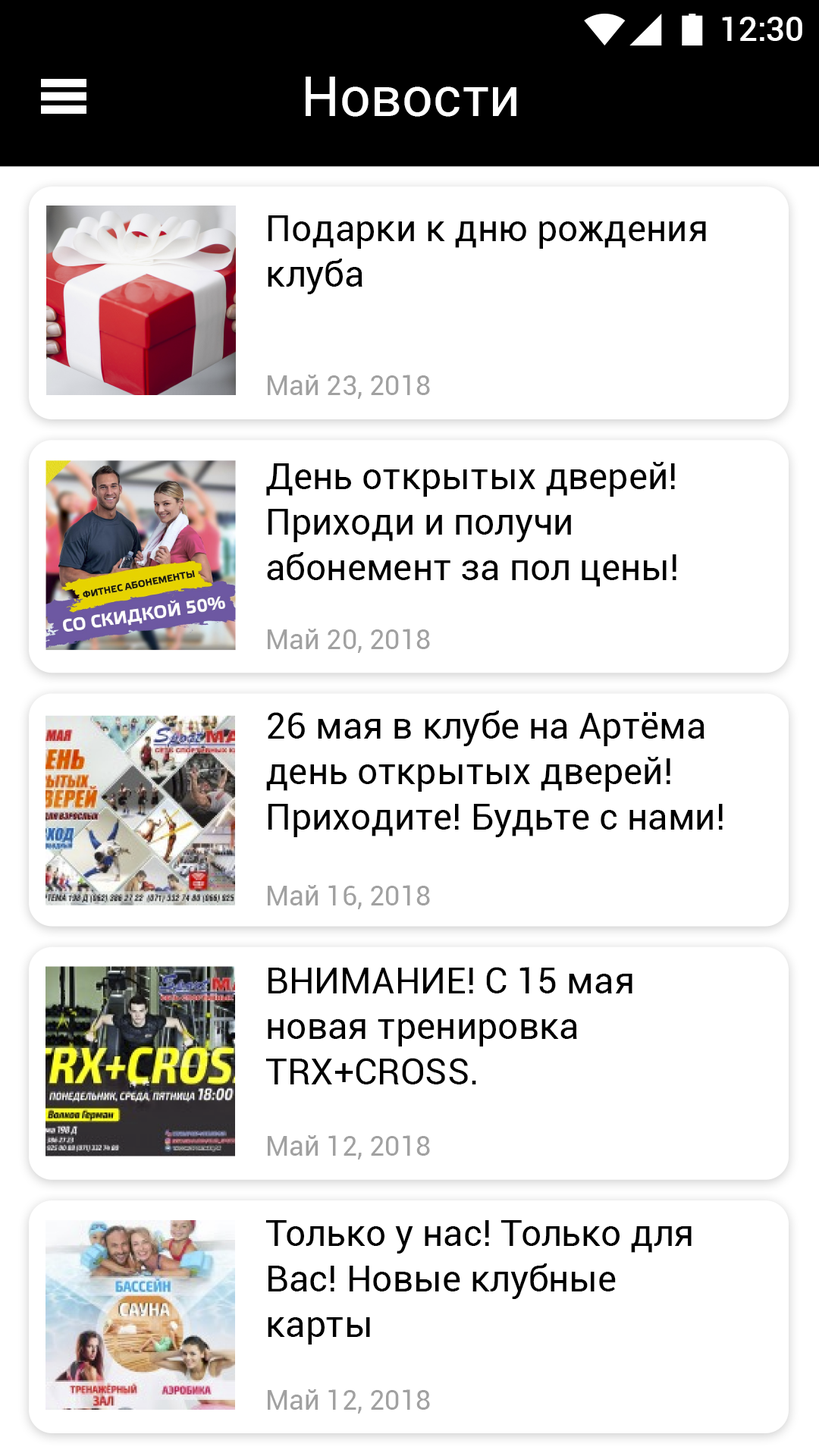
<style>
.page{position:relative;width:819px;height:1456px;background:#ffffff}
.page>*{position:absolute;margin:0}
.t1{font:33.4px "Roboto-Medium";color:#ffffff}
.t2{font:54.6px "Roboto-Regular";color:#ffffff}
.t3{font:36.4px/45.5px "Roboto-Regular";color:#000000}
.t4{font:27.3px "Roboto-Regular";color:#a1a1a1}
</style>
<div class="page">
<p class="t1" style="left:722px;top:17px;width:80px;height:24px">12:30</p>
<p class="t2" style="left:306px;top:77px;width:210px;height:40px">Новости</p>
<p class="t3" style="left:268px;top:215px;width:438px;height:79px">Подарки к дню рождения<br>клуба</p>
<p class="t4" style="left:268px;top:375px;width:162px;height:24px">Май 23, 2018</p>
<p class="t3" style="left:266px;top:462px;width:410px;height:125px">День открытых дверей! <br>Приходи и получи <br>абонемент за пол цены!</p>
<p class="t4" style="left:268px;top:629px;width:162px;height:24px">Май 20, 2018</p>
<p class="t3" style="left:266px;top:711px;width:457px;height:126px">26 мая в клубе на Артёма <br>день открытых дверей! <br>Приходите! Будьте с нами!</p>
<p class="t4" style="left:268px;top:885px;width:162px;height:24px">Май 16, 2018</p>
<p class="t3" style="left:265px;top:967px;width:367px;height:117px">ВНИМАНИЕ! С 15 мая <br>новая тренировка <br>TRX+CROSS.</p>
<p class="t4" style="left:268px;top:1135px;width:162px;height:24px">Май 12, 2018</p>
<p class="t3" style="left:265px;top:1220px;width:427px;height:125px">Только у нас! Только для<br>Вас! Новые клубные <br>карты</p>
<p class="t4" style="left:268px;top:1389px;width:162px;height:25px">Май 12, 2018</p>
</div>
